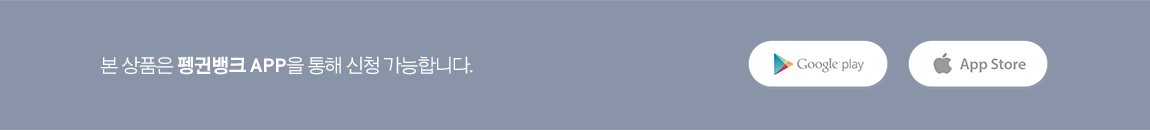
<style>
.page{position:relative;width:1150px;height:130px;background:#8a94a9}
.page>*{position:absolute;margin:0}
.t1{font:20px "Arita-dotum-Medium_TTF";letter-spacing:-0.06em;color:#ffffff}
.t2{font:20px "Arita-dotum-Bold_TTF";letter-spacing:-0.06em;color:#ffffff}
.t3{font:20px "Arita-dotum-Bold_TTF";color:#ffffff}
</style>
<div class="page">
<p class="t1" style="left:100px;top:56px;width:373px;height:19px">본 상품은 <span class="t2">펭귄뱅크 </span><span class="t3">APP</span>을 통해 신청 가능합니다.</p>
</div>
